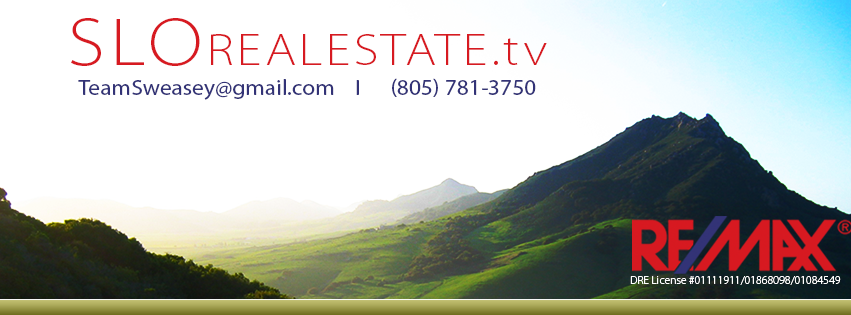
<style>
.page{position:relative;width:851px;height:315px;background:#ffffff}
.page>*{position:absolute;margin:0}
.t1{font:45px "MyriadPro-LightSemiExt";letter-spacing:0.07em;color:#d71a21;scale:1.07 1}
.t2{font:67.6px "MyriadPro-LightSemiExt";letter-spacing:0.07em;color:#d71a21;scale:1.07 1}
.t3{font:22px "MyriadPro-Regular";color:#333377;scale:1.07 1}
.t4{font:11.8px "MyriadPro-Light";color:#ffffff}
</style>
<div class="page">
<p class="t1" style="left:71px;top:18px;width:476px;height:48px"><span class="t2">SLO</span>REALESTATE.tv</p>
<p class="t3" style="left:78px;top:78px;width:458px;height:22px">TeamSweasey@gmail.com    I      (805) 781-3750</p>
<p class="t4" style="left:630px;top:276px;width:211px;height:9px">DRE License #01111911/01868098/01084549</p>
</div>
